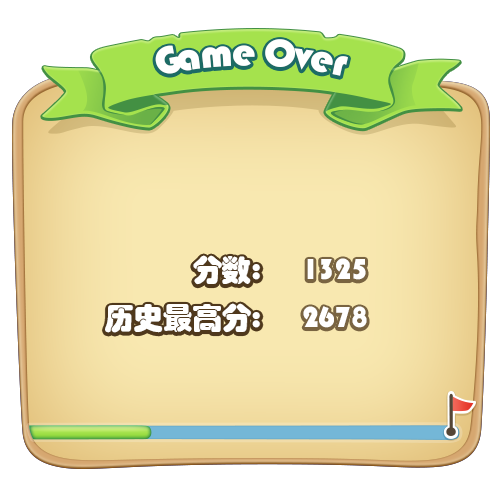
<style>
.page{position:relative;width:500px;height:500px;background:#ffffff}
.page>*{position:absolute;margin:0}
.t1{font:40px "STHupo";letter-spacing:-0.02em;color:#ffffff}
.t2{font:30px/48px "STHupo";letter-spacing:-0.02em;color:#ffffff}
</style>
<div class="page">
<p class="t1" style="left:155px;top:39px;width:193px;height:37px">Game Over</p>
<p class="t2" style="left:105px;top:255px;width:262px;height:78px;text-align:right">分数:      1325<br>历史最高分:      2678</p>
<p class="t2" style="left:105px;top:255px;width:155px;height:78px;text-align:right">分数:      <br>历史最高分:</p>
</div>
